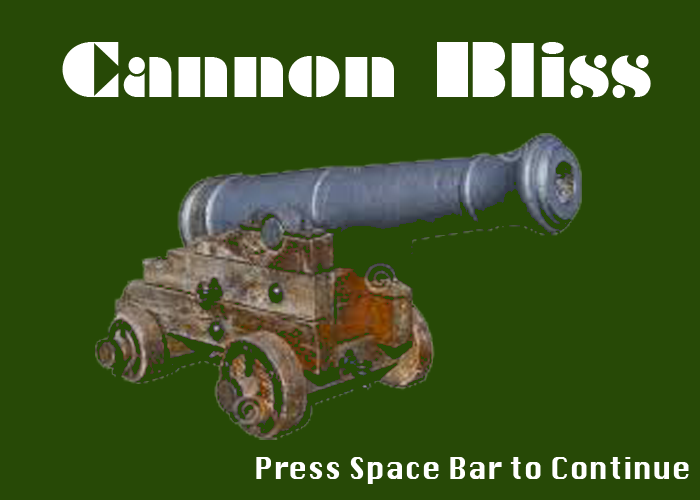
<style>
.page{position:relative;width:700px;height:500px;background:#274906}
.page>*{position:absolute;margin:0}
.t1{font:70.8px "Braggadocio";color:#ffffff}
.t2{font:29.2px "Krungthep";color:#ffffff}
</style>
<div class="page">
<p class="t1" style="left:62px;top:42px;width:589px;height:56px">Cannon Bliss</p>
<p class="t2" style="left:256px;top:457px;width:433px;height:27px">Press Space Bar to Continue</p>
</div>
